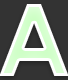
<style>
.page{position:relative;width:68px;height:80px;background:#333333}
.page>*{position:absolute;margin:0}
.t1{font:100px "CenturyGothic-Bold"}
</style>
<div class="page">
<p class="t1" style="left:0px;top:4px;width:69px;height:72px">A</p>
</div>
